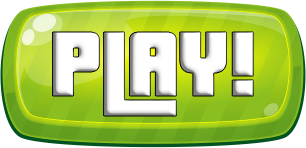
<style>
.page{position:relative;width:306px;height:148px;background:#ffffff}
.page>*{position:absolute;margin:0}
.t1{font:100px "PricedownBl-Regular";color:#ffffff}
</style>
<div class="page">
<p class="t1" style="left:52px;top:32px;width:202px;height:84px">PLAY!</p>
</div>
